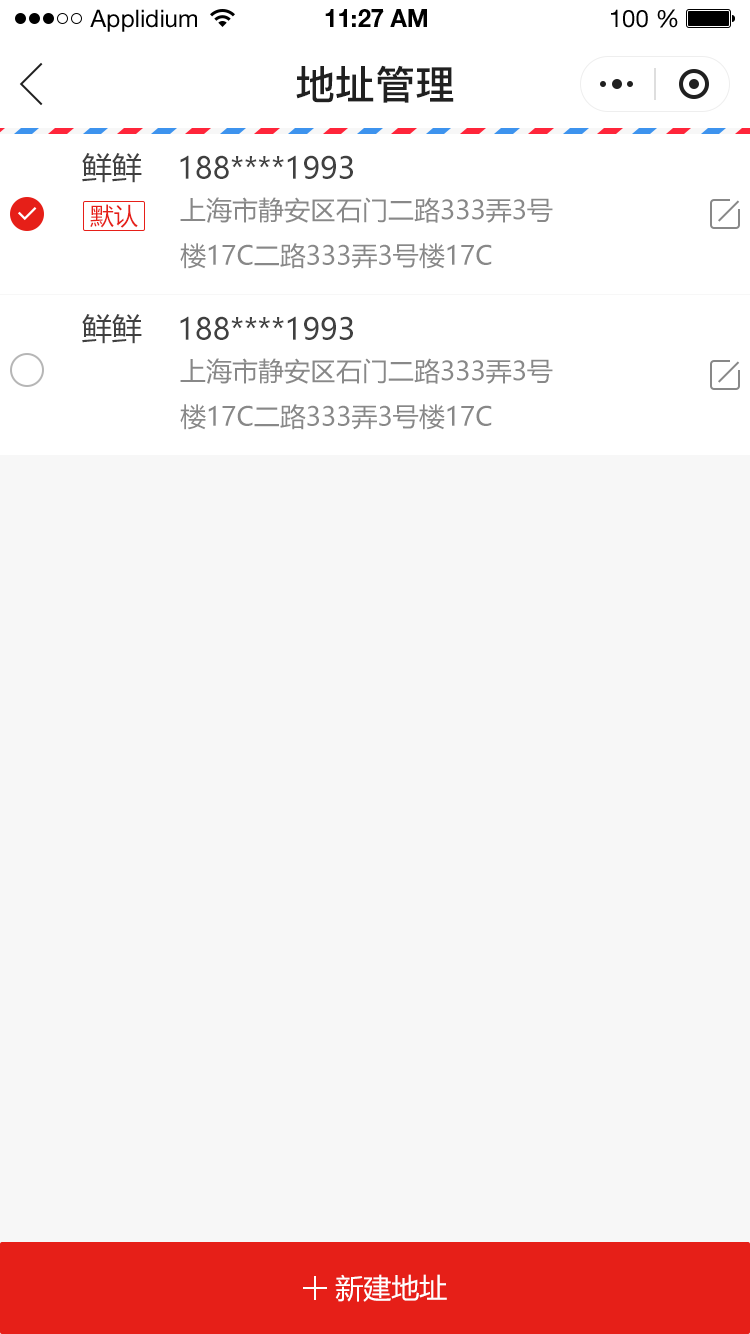
<style>
.page{position:relative;width:750px;height:1334px;background:#f7f7f7}
.page>*{position:absolute;margin:0}
.t1{font:24px "HelveticaNeueLTStd-Roman";color:#000000}
.t2{font:24px "HelveticaNeueLTStd-Bd";color:#000000}
.t3{font:40px "PingFang-SC-Bold";color:#202020;text-transform:uppercase}
.t4{font:30px "MicrosoftYaHei";color:#404040;text-transform:uppercase}
.t5{font:26px "MicrosoftYaHei";color:#888888;text-transform:uppercase}
.t6{font:24px "MicrosoftYaHei";color:#e61f18;text-transform:uppercase}
.t7{font:28px "MicrosoftYaHei";color:#ffffff;text-transform:uppercase}
</style>
<div class="page">
<p class="t1" style="left:90px;top:9px;width:107px;height:23px">Applidium</p>
<p class="t2" style="left:325px;top:9px;width:102px;height:18px">11:27 AM</p>
<p class="t1" style="left:611px;top:9px;width:67px;height:19px">100 %</p>
<p class="t3" style="left:296px;top:65px;width:158px;height:38px">地址管理</p>
<p class="t4" style="left:82px;top:153px;width:60px;height:30px">鲜鲜</p>
<p class="t4" style="left:180px;top:155px;width:173px;height:24px">188****1993</p>
<p class="t5" style="left:180px;top:197px;width:373px;height:72px">上海市静安区石门二路333弄3号<br>楼17c二路333弄3号楼17c</p>
<p class="t6" style="left:90px;top:204px;width:48px;height:24px">默认</p>
<p class="t4" style="left:82px;top:314px;width:60px;height:30px">鲜鲜</p>
<p class="t4" style="left:180px;top:316px;width:173px;height:24px">188****1993</p>
<p class="t5" style="left:180px;top:358px;width:373px;height:72px">上海市静安区石门二路333弄3号<br>楼17c二路333弄3号楼17c</p>
<p class="t7" style="left:335px;top:1274px;width:112px;height:28px">新建地址</p>
</div>
